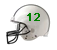
<style>
.page{position:relative;width:57px;height:50px;background:#ffffff}
.page>*{position:absolute;margin:0}
.t1{font:10.7px "ArialMT";letter-spacing:0.005em;color:#007f00;font-weight:bold}
</style>
<div class="page">
<p class="t1" style="left:27px;top:13px;width:13px;height:8px">12</p>
</div>
